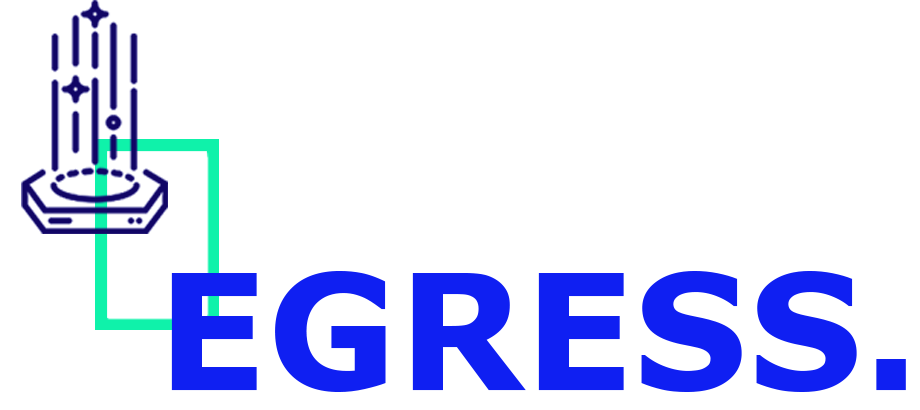
<style>
.page{position:relative;width:920px;height:410px;background:#ffffff}
.page>*{position:absolute;margin:0}
.t1{font:161px "Verdana-Bold";color:#0f1ff2}
</style>
<div class="page">
<p class="t1" style="left:171px;top:271px;width:735px;height:121px">EGRESS.</p>
</div>
